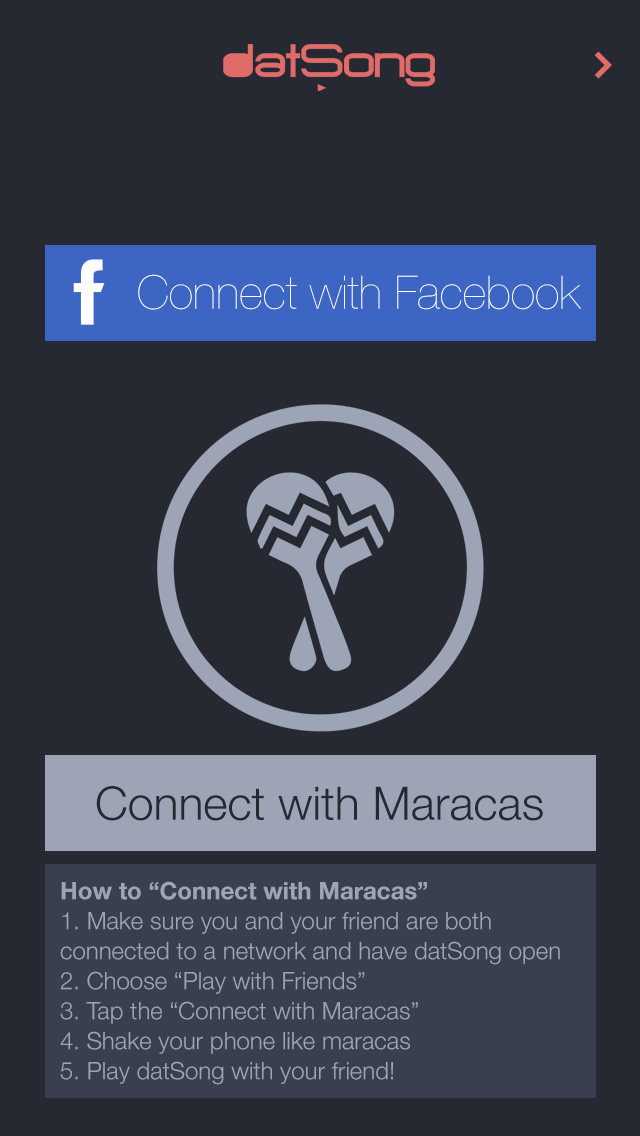
<style>
.page{position:relative;width:640px;height:1136px;background:#272932}
.page>*{position:absolute;margin:0}
.t1{font:46.4px "HelveticaNeue-UltraLight";color:#ffffff}
.t2{font:46.4px "HelveticaNeue-Light";color:#272932}
.t3{font:24px/30px "HelveticaNeue-Light";color:#9da4b5}
.t4{font:24px/30px "HelveticaNeue-Bold";color:#9da4b5}
</style>
<div class="page">
<p class="t1" style="left:138px;top:274px;width:444px;height:36px">Connect with Facebook</p>
<p class="t2" style="left:96px;top:786px;width:447px;height:35px">Connect with Maracas</p>
<p class="t3" style="left:60px;top:881px;width:500px;height:204px"><span class="t4">How to “Connect with Maracas”<br></span>1. Make sure you and your friend are both <br>connected to a network and have datSong open<br>2. Choose “Play with Friends”<br>3. Tap the “Connect with Maracas”<br>4. Shake your phone like maracas<br>5. Play datSong with your friend!</p>
</div>
